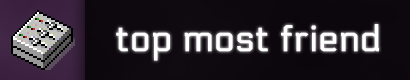
<style>
.page{position:relative;width:410px;height:80px}
.page>*{position:absolute;margin:0}
.t1{font:36px "Electrolize-Regular";color:#ffffff;font-weight:bold}
</style>
<div class="page">
<p class="t1" style="left:116px;top:24px;width:263px;height:37px">top most friend</p>
</div>
